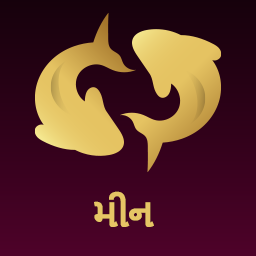
<style>
.page{position:relative;width:256px;height:256px}
.page>*{position:absolute;margin:0}
.t1{font:34.1px "NirmalaUI-Bold";letter-spacing:-0.05em;color:#e6c565;text-transform:uppercase;font-weight:bold}
</style>
<div class="page">
<p class="t1" style="left:94px;top:191px;width:60px;height:36px">મીન</p>
</div>
